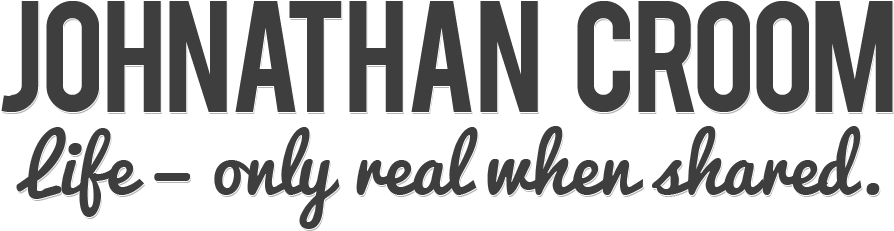
<style>
.page{position:relative;width:894px;height:231px;background:#ffffff}
.page>*{position:absolute;margin:0}
.t1{font:123px "Bebas";letter-spacing:-0.02em;color:#3e3e3e}
.t2{font:123px "Bebas";letter-spacing:-0.14em;color:#3e3e3e}
.t3{font:123px "Bebas";letter-spacing:-0.06em;color:#3e3e3e}
.t4{font:123px "Bebas";letter-spacing:-0.04em;color:#3e3e3e}
.t5{font:74px "Pacifico";color:#3e3e3e}
</style>
<div class="page">
<p class="t1" style="left:1px;top:1px;width:892px;height:111px">John<span class="t2">a</span>than C<span class="t3">r</span><span class="t4">oom</span></p>
<p class="t5" style="left:16px;top:126px;width:864px;height:103px">Life — only real when shared.</p>
</div>
